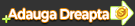
<style>
.page{position:relative;width:135px;height:26px;background:#333333}
.page>*{position:absolute;margin:0}
.t1{font:14.3px "Montserrat-Bold";letter-spacing:-0.04em;color:#ffffff;scale:0.88 1}
</style>
<div class="page">
<p class="t1" style="left:7px;top:8px;width:102px;height:14px">Adauga Dreapta</p>
</div>
